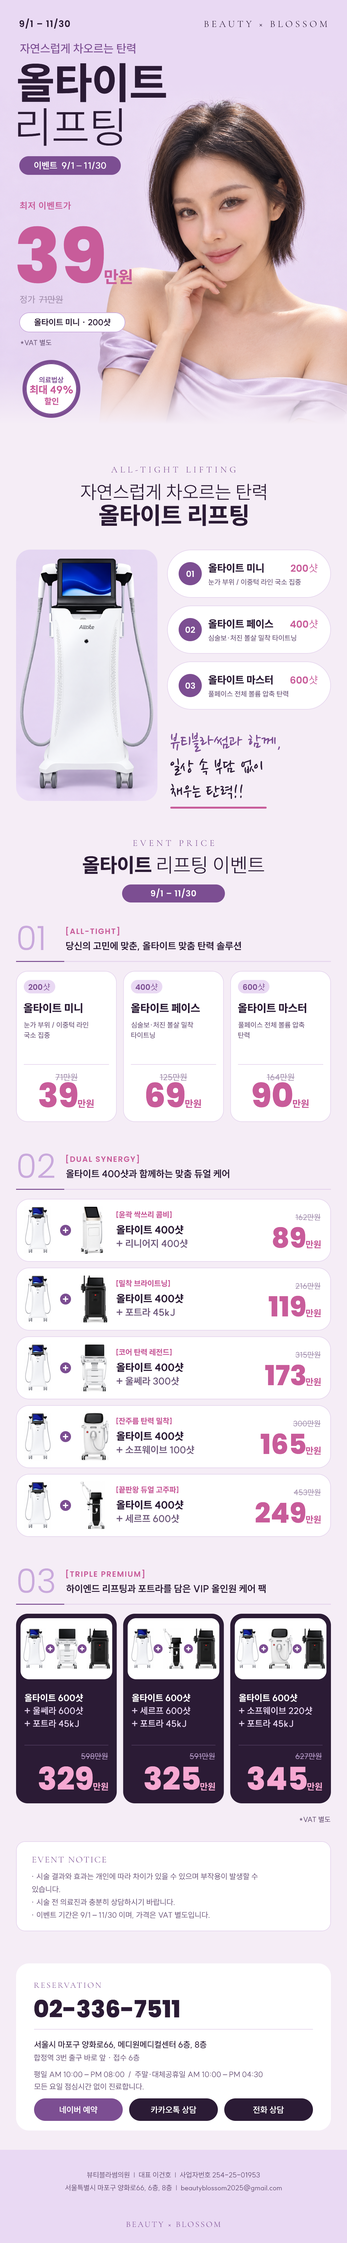
<style>
.page{position:relative;width:347px;height:2243px;background:#f5edf6}
.page>*{position:absolute;margin:0}
.t1{font:9px "Poppins-SemiBold";letter-spacing:0.06em;color:#2b1b35}
.t2{font:9.6px "CormorantGaramond-Light";letter-spacing:0.26em;color:#2b1b35}
.t3{font:11.6px "SUIT-Medium";color:#7c4e92}
.t4{font:43.1px "SUIT-ExtraBold";color:#2b1b35}
.t5{font:43.1px "SUIT-Light";color:#2b1b35}
.t6{font:9px "SUIT-Bold";color:#ffffff}
.t7{font:9px "SUIT-Bold";letter-spacing:0.04em;color:#c85c9a}
.t8{font:75.9px "Poppins-ExtraBold";color:#c85c9a}
.t9{font:16.7px "SUIT-ExtraBold";color:#c85c9a}
.t10{font:9px "SUIT-Medium";color:#a592b0}
.t11{font:8.4px "SUIT-Bold";color:#2b1b35}
.t12{font:7.1px "SUIT-Medium";color:#6f5a7c}
.t13{font:7.1px "SUIT-Bold";color:#7c4e92}
.t14{font:10.3px "SUIT-ExtraBold";color:#c85c9a}
.t15{font:8.4px "SUIT-ExtraBold";color:#c85c9a}
.t16{font:9px "CormorantGaramond-Light";letter-spacing:0.3em;color:#7c4e92}
.t17{font:18.6px "SUIT-Light";color:#2b1b35}
.t18{font:23.8px "SUIT-ExtraBold";color:#2b1b35}
.t19{font:10.3px "SUIT-ExtraBold";color:#2b1b35}
.t20{font:9.6px "Poppins-SemiBold";color:#c85c9a}
.t21{font:8.4px "Poppins-SemiBold";color:#ffffff}
.t22{font:19.9px "NanumPen-Regular";color:#7c4e92}
.t23{font:19.9px "NanumPen-Regular";color:#2b1b35}
.t24{font:9px "CormorantGaramond-Light";letter-spacing:0.3em}
.t25{font:19.9px "SUIT-ExtraBold";color:#2b1b35}
.t26{font:19.9px "SUIT-Light";color:#2b1b35}
.t27{font:8.4px "Poppins-SemiBold";letter-spacing:0.04em;color:#ffffff}
.t28{font:33.4px "Poppins-Light";color:#c9a9dc}
.t29{font:7.7px "Poppins-SemiBold";letter-spacing:0.1em;color:#c85c9a}
.t30{font:9.6px "SUIT-Bold";color:#2b1b35}
.t31{font:7.7px "Poppins-SemiBold";color:#7c4e92}
.t32{font:10.9px "SUIT-ExtraBold";color:#2b1b35}
.t33{font:7.1px "SUIT-Medium"}
.t34{font:8.4px "SUIT-Medium";color:#a592b0}
.t35{font:33.4px "Poppins-ExtraBold";color:#c85c9a}
.t36{font:9.6px "SUIT-ExtraBold";color:#c85c9a}
.t37{font:7.7px "SUIT-ExtraBold";color:#c85c9a}
.t38{font:7.7px "SUIT-Medium";color:#a592b0}
.t39{font:27.6px "Poppins-ExtraBold";color:#c85c9a}
.t40{font:9.6px "SUIT-Bold";color:#6f5a7c}
.t41{font:9px "SUIT-ExtraBold";color:#c85c9a}
.t42{font:9px "SUIT-ExtraBold";color:#ffffff}
.t43{font:9px "SUIT-Bold";color:#e4d2ee}
.t44{font:7.7px "SUIT-Medium";color:#b79bc9}
.t45{font:31.5px "Poppins-ExtraBold";color:#f6a8d2}
.t46{font:9px "SUIT-ExtraBold";color:#f6a8d2}
.t47{font:9px "CormorantGaramond-Light";letter-spacing:0.12em;color:#7c4e92}
.t48{font:7.7px "SUIT-Regular";color:#6f5a7c}
.t49{font:8.4px "CormorantGaramond-Light";letter-spacing:0.16em;color:#7c4e92}
.t50{font:23.8px "Poppins-ExtraBold";color:#2b1b35}
.t51{font:8.4px "SUIT-Medium";color:#2b1b35}
.t52{font:8.4px "SUIT-Bold";color:#ffffff}
.t53{font:7.1px "SUIT-Regular";color:#6f5a7c}
.t54{font:8.4px "CormorantGaramond-Light";letter-spacing:0.16em}
</style>
<div class="page">
<p class="t1" style="left:19px;top:18px;width:51px;height:11px">9/1 – 11/30</p>
<p class="t2" style="left:204px;top:21px;width:124px;height:6px">BEAUTY × BLOSSOM</p>
<p class="t3" style="left:20px;top:43px;width:115px;height:11px">자연스럽게 차오르는 탄력</p>
<p class="t4" style="left:18px;top:63px;width:148px;height:39px">올타이트</p>
<p class="t5" style="left:18px;top:108px;width:104px;height:38px">리프팅</p>
<p class="t6" style="left:34px;top:161px;width:72px;height:9px">이벤트  9/1 – 11/30</p>
<p class="t7" style="left:20px;top:202px;width:51px;height:8px">최저 이벤트가</p>
<p class="t8" style="left:17px;top:226px;width:87px;height:58px">39</p>
<p class="t9" style="left:105px;top:269px;width:27px;height:15px">만원</p>
<p class="t10" style="left:20px;top:295px;width:15px;height:9px">정가</p>
<p class="t10" style="left:39px;top:295px;width:24px;height:8px">71만원</p>
<p class="t11" style="left:34px;top:319px;width:76px;height:7px">올타이트 미니 · 200샷</p>
<p class="t12" style="left:21px;top:339px;width:30px;height:7px">*VAT 별도</p>
<p class="t13" style="left:39px;top:377px;width:25px;height:6px">의료법상</p>
<p class="t14" style="left:30px;top:385px;width:43px;height:9px">최대 49%</p>
<p class="t15" style="left:44px;top:397px;width:14px;height:8px">할인</p>
<p class="t16" style="left:111px;top:466px;width:125px;height:7px">ALL-TIGHT LIFTING</p>
<p class="t17" style="left:81px;top:484px;width:185px;height:16px">자연스럽게 차오르는 탄력</p>
<p class="t18" style="left:99px;top:504px;width:149px;height:22px">올타이트 리프팅</p>
<p class="t19" style="left:209px;top:563px;width:55px;height:10px">올타이트 미니</p>
<p class="t20" style="left:291px;top:563px;width:27px;height:9px">200샷</p>
<p class="t21" style="left:186px;top:571px;width:8px;height:6px">01</p>
<p class="t12" style="left:208px;top:579px;width:93px;height:6px">눈가 부위 / 이중턱 라인 국소 집중</p>
<p class="t21" style="left:185px;top:626px;width:10px;height:7px">02</p>
<p class="t19" style="left:209px;top:619px;width:65px;height:10px">올타이트 페이스</p>
<p class="t20" style="left:290px;top:619px;width:28px;height:9px">400샷</p>
<p class="t12" style="left:209px;top:635px;width:87px;height:6px">심술보·처진 볼살 밀착 타이트닝</p>
<p class="t19" style="left:209px;top:675px;width:64px;height:10px">올타이트 마스터</p>
<p class="t20" style="left:291px;top:675px;width:27px;height:9px">600샷</p>
<p class="t21" style="left:185px;top:682px;width:10px;height:7px">03</p>
<p class="t12" style="left:208px;top:691px;width:80px;height:6px">풀페이스 전체 볼륨 압축 탄력</p>
<p class="t22" style="left:170px;top:732px;width:110px;height:20px">뷰티블라썸과 함께,</p>
<p class="t23" style="left:170px;top:758px;width:93px;height:18px">일상 속 부담 없이</p>
<p class="t23" style="left:170px;top:784px;width:73px;height:15px">채우는 탄력!!</p>
<p class="t24" style="left:133px;top:840px;width:81px;height:6px">EVENT PRICE</p>
<p class="t25" style="left:83px;top:856px;width:68px;height:18px">올타이트</p>
<p class="t26" style="left:158px;top:856px;width:106px;height:18px">리프팅 이벤트</p>
<p class="t27" style="left:151px;top:888px;width:45px;height:10px">9/1 – 11/30</p>
<p class="t28" style="left:18px;top:926px;width:25px;height:24px">01</p>
<p class="t29" style="left:66px;top:927px;width:53px;height:9px">[ALL-TIGHT]</p>
<p class="t30" style="left:66px;top:941px;width:175px;height:10px">당신의 고민에 맞춘, 올타이트 맞춤 탄력 솔루션</p>
<p class="t31" style="left:29px;top:983px;width:21px;height:8px">200샷</p>
<p class="t31" style="left:135px;top:983px;width:23px;height:8px">400샷</p>
<p class="t31" style="left:243px;top:983px;width:22px;height:8px">600샷</p>
<p class="t32" style="left:24px;top:1003px;width:58px;height:10px">올타이트 미니</p>
<p class="t32" style="left:131px;top:1003px;width:69px;height:10px">올타이트 페이스</p>
<p class="t32" style="left:238px;top:1003px;width:68px;height:10px">올타이트 마스터</p>
<p class="t12" style="left:24px;top:1022px;width:64px;height:6px">눈가 부위 / 이중턱 라인</p>
<p class="t12" style="left:131px;top:1022px;width:62px;height:6px">심술보·처진 볼살 밀착</p>
<p class="t12" style="left:238px;top:1022px;width:66px;height:6px">풀페이스 전체 볼륨 압축</p>
<p class="t12" style="left:24px;top:1032px;width:26px;height:7px">국소 집중</p>
<p class="t33" style="left:131px;top:1032px;width:24px;height:7px">타이트닝</p>
<p class="t12" style="left:238px;top:1032px;width:11px;height:7px">탄력</p>
<p class="t34" style="left:55px;top:1074px;width:22px;height:7px">71만원</p>
<p class="t34" style="left:159px;top:1074px;width:28px;height:7px">125만원</p>
<p class="t34" style="left:266px;top:1074px;width:28px;height:7px">164만원</p>
<p class="t35" style="left:39px;top:1082px;width:38px;height:26px">39</p>
<p class="t35" style="left:146px;top:1082px;width:38px;height:26px">69</p>
<p class="t35" style="left:252px;top:1082px;width:40px;height:26px">90</p>
<p class="t36" style="left:77px;top:1099px;width:17px;height:9px">만원</p>
<p class="t36" style="left:185px;top:1099px;width:16px;height:9px">만원</p>
<p class="t36" style="left:292px;top:1099px;width:17px;height:9px">만원</p>
<p class="t28" style="left:18px;top:1154px;width:36px;height:24px">02</p>
<p class="t29" style="left:66px;top:1155px;width:73px;height:9px">[DUAL SYNERGY]</p>
<p class="t30" style="left:66px;top:1169px;width:164px;height:9px">올타이트 400샷과 함께하는 맞춤 듀얼 케어</p>
<p class="t37" style="left:116px;top:1211px;width:56px;height:7px">[윤곽 싹쓰리 콤비]</p>
<p class="t38" style="left:295px;top:1214px;width:26px;height:7px">162만원</p>
<p class="t19" style="left:117px;top:1225px;width:67px;height:10px">올타이트 400샷</p>
<p class="t39" style="left:273px;top:1227px;width:32px;height:21px">89</p>
<p class="t40" style="left:117px;top:1239px;width:71px;height:9px">+ 리니어지 400샷</p>
<p class="t41" style="left:306px;top:1240px;width:15px;height:8px">만원</p>
<p class="t37" style="left:116px;top:1280px;width:54px;height:7px">[밀착 브라이트닝]</p>
<p class="t38" style="left:295px;top:1282px;width:26px;height:8px">216만원</p>
<p class="t19" style="left:117px;top:1294px;width:67px;height:9px">올타이트 400샷</p>
<p class="t39" style="left:269px;top:1296px;width:37px;height:21px">119</p>
<p class="t40" style="left:117px;top:1308px;width:58px;height:9px">+ 포트라 45kJ</p>
<p class="t41" style="left:306px;top:1309px;width:15px;height:8px">만원</p>
<p class="t37" style="left:116px;top:1349px;width:56px;height:7px">[코어 탄력 레전드]</p>
<p class="t38" style="left:295px;top:1351px;width:26px;height:7px">315만원</p>
<p class="t19" style="left:117px;top:1363px;width:67px;height:9px">올타이트 400샷</p>
<p class="t39" style="left:265px;top:1364px;width:41px;height:22px">173</p>
<p class="t40" style="left:117px;top:1377px;width:62px;height:9px">+ 울쎄라 300샷</p>
<p class="t41" style="left:306px;top:1378px;width:15px;height:8px">만원</p>
<p class="t37" style="left:116px;top:1418px;width:56px;height:7px">[잔주름 탄력 밀착]</p>
<p class="t38" style="left:293px;top:1420px;width:28px;height:7px">300만원</p>
<p class="t19" style="left:117px;top:1431px;width:67px;height:10px">올타이트 400샷</p>
<p class="t39" style="left:261px;top:1434px;width:45px;height:20px">165</p>
<p class="t40" style="left:117px;top:1445px;width:77px;height:9px">+ 소프웨이브 100샷</p>
<p class="t41" style="left:306px;top:1447px;width:15px;height:8px">만원</p>
<p class="t37" style="left:116px;top:1486px;width:62px;height:7px">[끝판왕 듀얼 고주파]</p>
<p class="t38" style="left:294px;top:1489px;width:27px;height:7px">453만원</p>
<p class="t19" style="left:117px;top:1500px;width:67px;height:10px">올타이트 400샷</p>
<p class="t39" style="left:256px;top:1502px;width:50px;height:21px">249</p>
<p class="t40" style="left:117px;top:1514px;width:62px;height:9px">+ 세르프 600샷</p>
<p class="t41" style="left:306px;top:1516px;width:15px;height:8px">만원</p>
<p class="t28" style="left:18px;top:1569px;width:36px;height:24px">03</p>
<p class="t29" style="left:66px;top:1570px;width:78px;height:9px">[TRIPLE PREMIUM]</p>
<p class="t30" style="left:66px;top:1584px;width:200px;height:9px">하이엔드 리프팅과 포트라를 담은 VIP 올인원 케어 팩</p>
<p class="t42" style="left:24px;top:1694px;width:59px;height:8px">올타이트 600샷</p>
<p class="t42" style="left:131px;top:1694px;width:59px;height:8px">올타이트 600샷</p>
<p class="t42" style="left:239px;top:1694px;width:58px;height:8px">올타이트 600샷</p>
<p class="t43" style="left:24px;top:1707px;width:59px;height:8px">+ 울쎄라 600샷</p>
<p class="t43" style="left:131px;top:1707px;width:59px;height:8px">+ 세르프 600샷</p>
<p class="t43" style="left:239px;top:1707px;width:73px;height:8px">+ 소프웨이브 220샷</p>
<p class="t43" style="left:24px;top:1720px;width:55px;height:8px">+ 포트라 45kJ</p>
<p class="t43" style="left:131px;top:1720px;width:55px;height:8px">+ 포트라 45kJ</p>
<p class="t43" style="left:239px;top:1720px;width:54px;height:8px">+ 포트라 45kJ</p>
<p class="t44" style="left:81px;top:1753px;width:27px;height:7px">598만원</p>
<p class="t44" style="left:189px;top:1753px;width:26px;height:7px">591만원</p>
<p class="t44" style="left:295px;top:1753px;width:27px;height:7px">627만원</p>
<p class="t45" style="left:39px;top:1766px;width:54px;height:24px">329</p>
<p class="t45" style="left:144px;top:1766px;width:56px;height:24px">325</p>
<p class="t45" style="left:248px;top:1766px;width:59px;height:24px">345</p>
<p class="t46" style="left:93px;top:1783px;width:15px;height:8px">만원</p>
<p class="t46" style="left:200px;top:1783px;width:15px;height:8px">만원</p>
<p class="t46" style="left:307px;top:1783px;width:15px;height:8px">만원</p>
<p class="t12" style="left:300px;top:1816px;width:30px;height:7px">*VAT 별도</p>
<p class="t47" style="left:32px;top:1857px;width:74px;height:6px">EVENT NOTICE</p>
<p class="t48" style="left:32px;top:1873px;width:226px;height:7px">· 시술 결과와 효과는 개인에 따라 차이가 있을 수 있으며 부작용이 발생할 수</p>
<p class="t48" style="left:32px;top:1886px;width:28px;height:7px">있습니다.</p>
<p class="t48" style="left:32px;top:1899px;width:143px;height:7px">· 시술 전 의료진과 충분히 상담하시기 바랍니다.</p>
<p class="t48" style="left:32px;top:1912px;width:178px;height:7px">· 이벤트 기간은 9/1 – 11/30 이며, 가격은 VAT 별도입니다.</p>
<p class="t49" style="left:34px;top:1983px;width:67px;height:5px">RESERVATION</p>
<p class="t50" style="left:34px;top:2000px;width:145px;height:18px">02-336-7511</p>
<p class="t51" style="left:34px;top:2041px;width:173px;height:8px">서울시 마포구 양화로66, 메디원메디컬센터 6층, 8층</p>
<p class="t48" style="left:34px;top:2054px;width:106px;height:7px">합정역 3번 출구 바로 앞 · 접수 6층</p>
<p class="t48" style="left:34px;top:2071px;width:229px;height:7px">평일 AM 10:00 – PM 08:00  /  주말·대체공휴일 AM 10:00 – PM 04:30</p>
<p class="t48" style="left:34px;top:2083px;width:110px;height:7px">모든 요일 점심시간 없이 진료합니다.</p>
<p class="t52" style="left:59px;top:2106px;width:38px;height:8px">네이버 예약</p>
<p class="t52" style="left:151px;top:2106px;width:45px;height:8px">카카오톡 상담</p>
<p class="t52" style="left:253px;top:2106px;width:31px;height:8px">전화 상담</p>
<p class="t53" style="left:87px;top:2172px;width:173px;height:6px">뷰티블라썸의원  |  대표 이건호  |  사업자번호 254-25-01953</p>
<p class="t53" style="left:65px;top:2185px;width:217px;height:7px">서울특별시 마포구 양화로66, 6층, 8층  |  beautyblossom2025@gmail.com</p>
<p class="t54" style="left:126px;top:2222px;width:94px;height:6px">BEAUTY × BLOSSOM</p>
</div>
